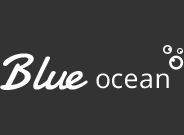
<style>
.page{position:relative;width:184px;height:135px;background:#333333}
.page>*{position:absolute;margin:0}
.t1{font:50.5px "Damion";color:#ffffff}
.t2{font:26.6px "OpenSans";color:#ffffff}
</style>
<div class="page">
<p class="t1" style="left:0px;top:53px;width:88px;height:37px">Blue</p>
<p class="t2" style="left:96px;top:73px;width:73px;height:16px">ocean</p>
</div>
